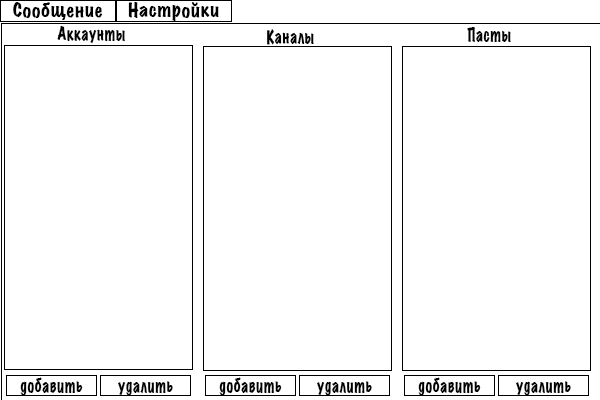
<style>
.page{position:relative;width:600px;height:400px;background:#ffffff}
.page>*{position:absolute;margin:0}
.t1{font:17.9px "MarkerFelt-Wide";letter-spacing:0.04em;color:#000000;scale:0.93 1}
.t2{font:17.1px "MarkerFelt-Wide";letter-spacing:0.04em;color:#000000;scale:0.77 1}
</style>
<div class="page">
<p class="t1" style="left:13px;top:2px;width:90px;height:18px">Сообщение</p>
<p class="t1" style="left:128px;top:2px;width:91px;height:19px">Настройки</p>
<p class="t2" style="left:57px;top:26px;width:68px;height:17px">Аккаунты</p>
<p class="t2" style="left:267px;top:29px;width:47px;height:16px">Каналы</p>
<p class="t2" style="left:467px;top:27px;width:44px;height:15px">Пасты</p>
<p class="t2" style="left:20px;top:377px;width:63px;height:19px">добавить</p>
<p class="t2" style="left:219px;top:377px;width:63px;height:19px">добавить</p>
<p class="t2" style="left:418px;top:377px;width:63px;height:19px">добавить</p>
<p class="t2" style="left:118px;top:381px;width:55px;height:15px">удалить</p>
<p class="t2" style="left:317px;top:381px;width:55px;height:15px">удалить</p>
<p class="t2" style="left:516px;top:381px;width:55px;height:15px">удалить</p>
</div>
